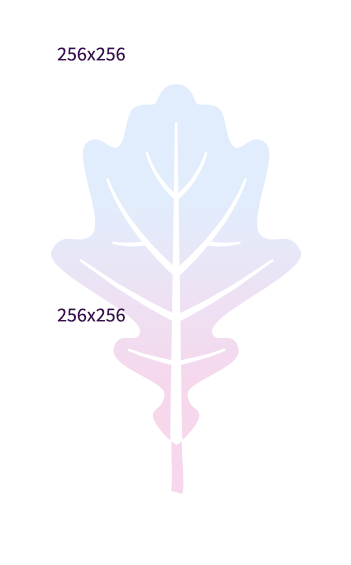
<style>
.page{position:relative;width:351px;height:565px;background:#ffffff}
.page>*{position:absolute;margin:0}
.t1{font:20px "SourceSansPro-Regular";color:#390a50}
</style>
<div class="page">
<p class="t1" style="left:57px;top:47px;width:68px;height:14px">256x256</p>
<p class="t1" style="left:57px;top:308px;width:68px;height:14px">256x256</p>
</div>
